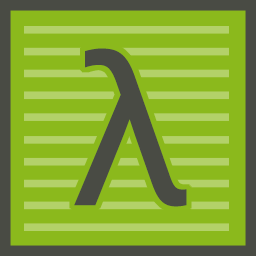
<style>
.page{position:relative;width:256px;height:256px;background:#8bb91c}
.page>*{position:absolute;margin:0}
.t1{font:224.7px "Consolas";letter-spacing:0.01em;color:#494b44}
</style>
<div class="page">
<p class="t1" style="left:74px;top:48px;width:113px;height:159px">λ</p>
</div>
